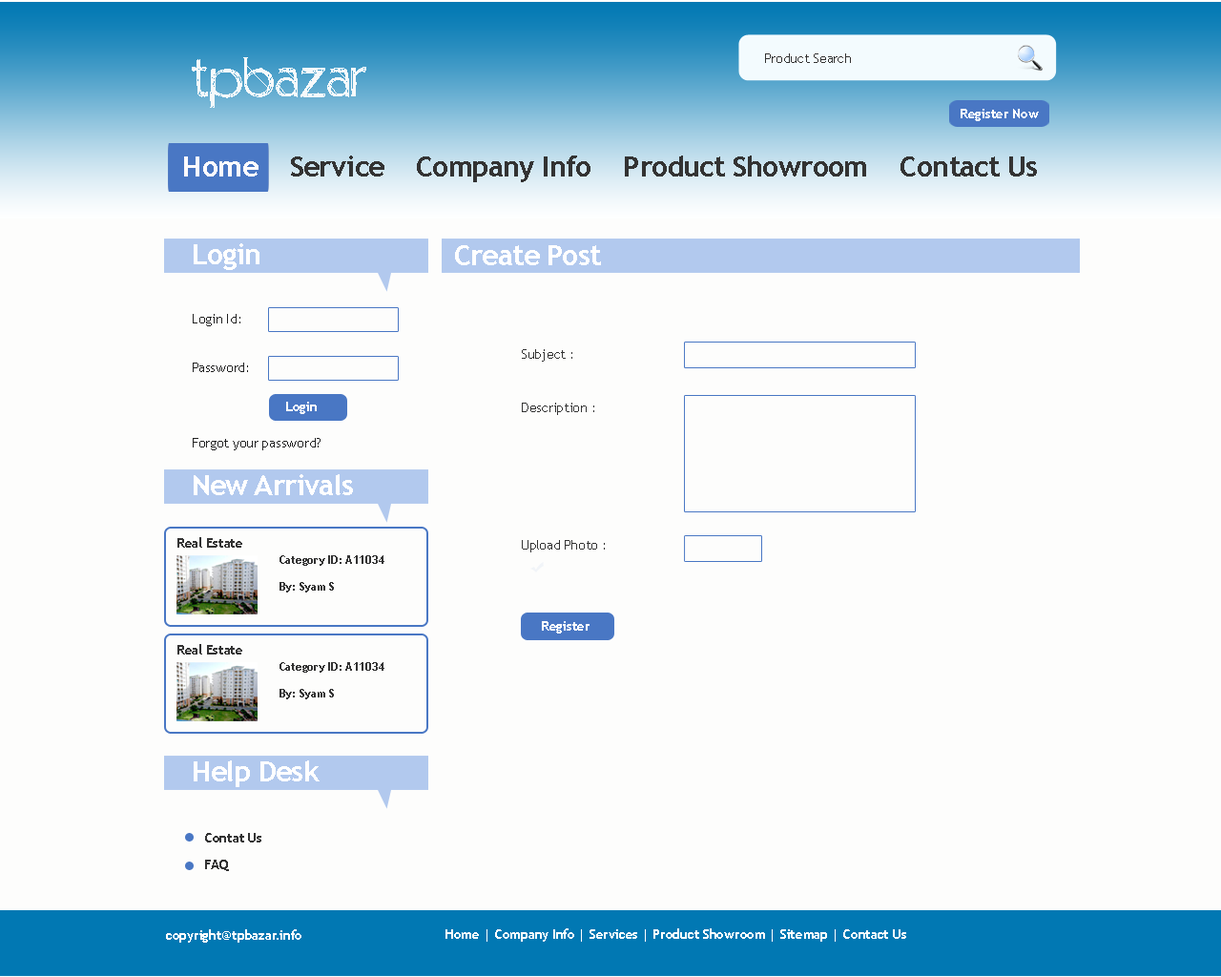
<style>
.page{position:relative;width:1221px;height:977px;background:#fdfdfc}
.page>*{position:absolute;margin:0}
.t1{font:13.4px "TrebuchetMS";letter-spacing:-0.02em;color:#333333}
.t2{font:68.7px "Positiv-A";letter-spacing:-0.02em;color:#f7f9fa}
.t3{font:13.4px "TrebuchetMS-Bold";letter-spacing:-0.02em;color:#ffffff}
.t4{font:28.6px "TrebuchetMS-Bold";letter-spacing:-0.02em;color:#333333}
.t5{font:28.6px "TrebuchetMS-Bold";letter-spacing:-0.02em;color:#fdfafc}
.t6{font:28.6px "TrebuchetMS-Bold";letter-spacing:-0.02em;color:#ffffff}
.t7{font:13.4px "TrebuchetMS";letter-spacing:-0.02em;color:#212121}
.t8{font:13.4px "TrebuchetMS-Bold";letter-spacing:-0.02em;color:#fefdfd}
.t9{font:13.4px "TrebuchetMS-Bold";letter-spacing:-0.02em;color:#333333}
.t10{font:11.4px/26.7px "TrebuchetMS-Bold";letter-spacing:-0.02em;color:#333333}
.t11{font:13.4px/26.7px "TrebuchetMS-Bold";letter-spacing:-0.02em;color:#333333}
</style>
<div class="page">
<p class="t1" style="left:765px;top:53px;width:86px;height:10px">Product Search</p>
<p class="t2" style="left:192px;top:57px;width:174px;height:51px">tpbazar</p>
<p class="t3" style="left:960px;top:109px;width:79px;height:12px">Register Now</p>
<p class="t4" style="left:184px;top:155px;width:853px;height:27px"><span class="t5">Home </span>   Service    Company Info    Product Showroom    Contact Us</p>
<p class="t6" style="left:194px;top:243px;width:65px;height:27px">Login</p>
<p class="t6" style="left:455px;top:245px;width:146px;height:20px">Create Post</p>
<p class="t7" style="left:193px;top:314px;width:47px;height:12px">Login Id:</p>
<p class="t1" style="left:522px;top:349px;width:50px;height:12px">Subject :</p>
<p class="t7" style="left:193px;top:362px;width:55px;height:10px">Password:</p>
<p class="t8" style="left:286px;top:402px;width:31px;height:12px">Login</p>
<p class="t1" style="left:522px;top:403px;width:72px;height:12px">Description :</p>
<p class="t7" style="left:193px;top:438px;width:127px;height:12px">Forgot your password?</p>
<p class="t6" style="left:194px;top:474px;width:159px;height:21px">New Arrivals</p>
<p class="t9" style="left:177px;top:537px;width:65px;height:10px">Real Estate</p>
<p class="t1" style="left:522px;top:540px;width:83px;height:12px">Upload Photo :</p>
<p class="t10" style="left:279px;top:555px;width:105px;height:37px">Category ID: A11034<br>By: Syam S</p>
<p class="t3" style="left:542px;top:621px;width:47px;height:12px">Register</p>
<p class="t9" style="left:177px;top:644px;width:65px;height:10px">Real Estate</p>
<p class="t10" style="left:279px;top:662px;width:105px;height:37px">Category ID: A11034<br>By: Syam S</p>
<p class="t6" style="left:194px;top:760px;width:126px;height:27px">Help Desk</p>
<p class="t11" style="left:205px;top:833px;width:56px;height:38px">Contat Us<br>FAQ</p>
<p class="t3" style="left:166px;top:929px;width:135px;height:13px">copyright@tpbazar.info</p>
<p class="t3" style="left:445px;top:928px;width:461px;height:13px">Home | Company Info | Services | Product Showroom | Sitemap | Contact Us</p>
</div>
